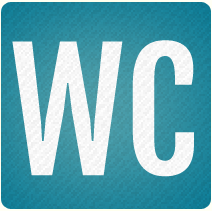
<style>
.page{position:relative;width:212px;height:211px}
.page>*{position:absolute;margin:0}
.t1{font:160px "FjallaOne-Regular";color:#ffffff}
</style>
<div class="page">
<p class="t1" style="left:12px;top:40px;width:182px;height:137px">WC</p>
</div>
